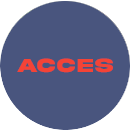
<style>
.page{position:relative;width:131px;height:131px;background:#49557e}
.page>*{position:absolute;margin:0}
.t1{font:20px "AkiraExpanded-SuperBold";letter-spacing:0.044em;color:#f44336}
</style>
<div class="page">
<p class="t1" style="left:17px;top:58px;width:96px;height:15px">Acces</p>
</div>
